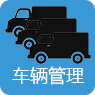
<style>
.page{position:relative;width:95px;height:95px;background:#3998d6}
.page>*{position:absolute;margin:0}
.t1{font:18px "MicrosoftYaHei";color:#ffffff}
</style>
<div class="page">
<p class="t1" style="left:12px;top:66px;width:72px;height:19px">车辆管理</p>
</div>
